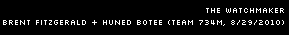
<style>
.page{position:relative;width:289px;height:35px;background:#000000}
.page>*{position:absolute;margin:0}
.t1{font:8px/12px "Silkscreen";color:#ffffff}
</style>
<div class="page">
<p class="t1" style="left:3px;top:8px;width:281px;height:18px;text-align:right">The watchmaker<br>Brent Fitzgerald + Huned Botee (Team 734M, 8/29/2010)</p>
</div>
